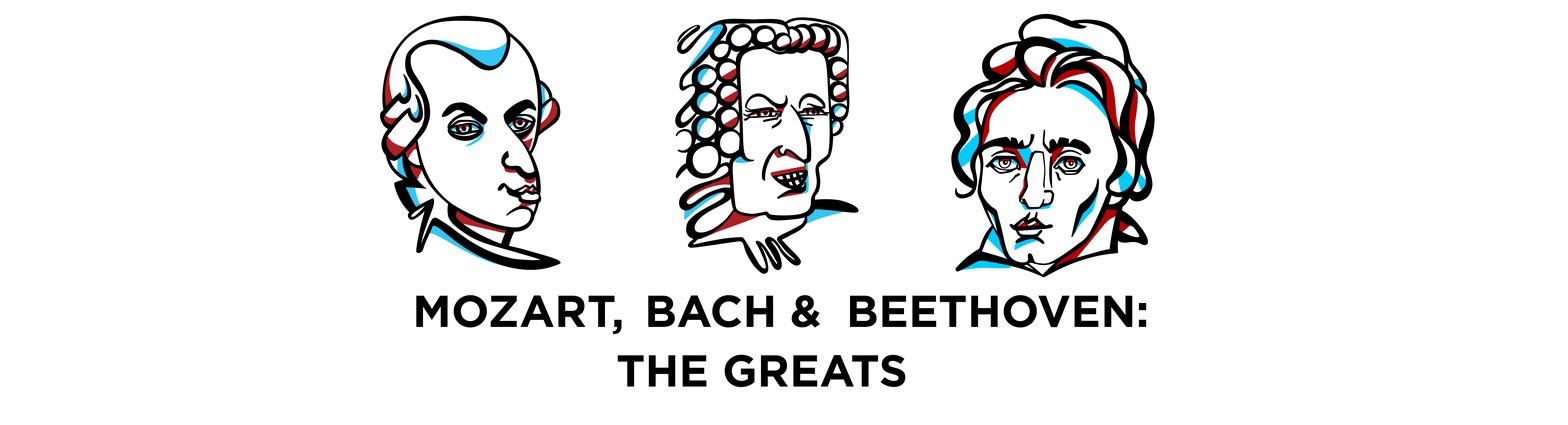
<style>
.page{position:relative;width:1568px;height:425px;background:#ffffff}
.page>*{position:absolute;margin:0}
.t1{font:44.7px "Gotham-Bold";color:#000000}
</style>
<div class="page">
<p class="t1" style="left:416px;top:295px;width:206px;height:39px">MOZART,</p>
<p class="t1" style="left:648px;top:295px;width:172px;height:33px">BACH &amp;</p>
<p class="t1" style="left:850px;top:295px;width:296px;height:33px">BEETHOVEN:</p>
<p class="t1" style="left:618px;top:355px;width:287px;height:32px">THE GREATS</p>
</div>
